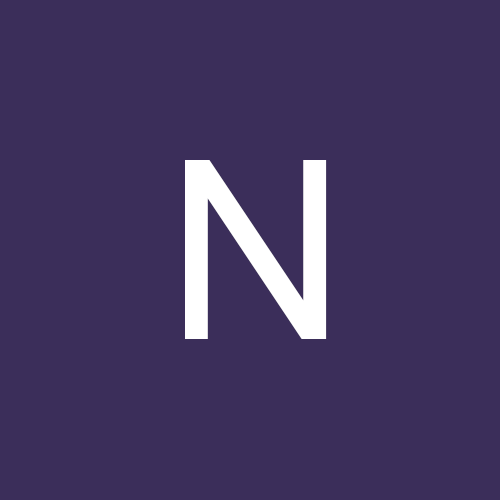
<style>
.page{position:relative;width:500px;height:500px;background:#3b2e5a}
.page>*{position:absolute;margin:0}
.t1{font:250px "ArialMT";color:#ffffff}
</style>
<div class="page">
<p class="t1" style="left:185px;top:160px;width:142px;height:179px">N</p>
</div>
